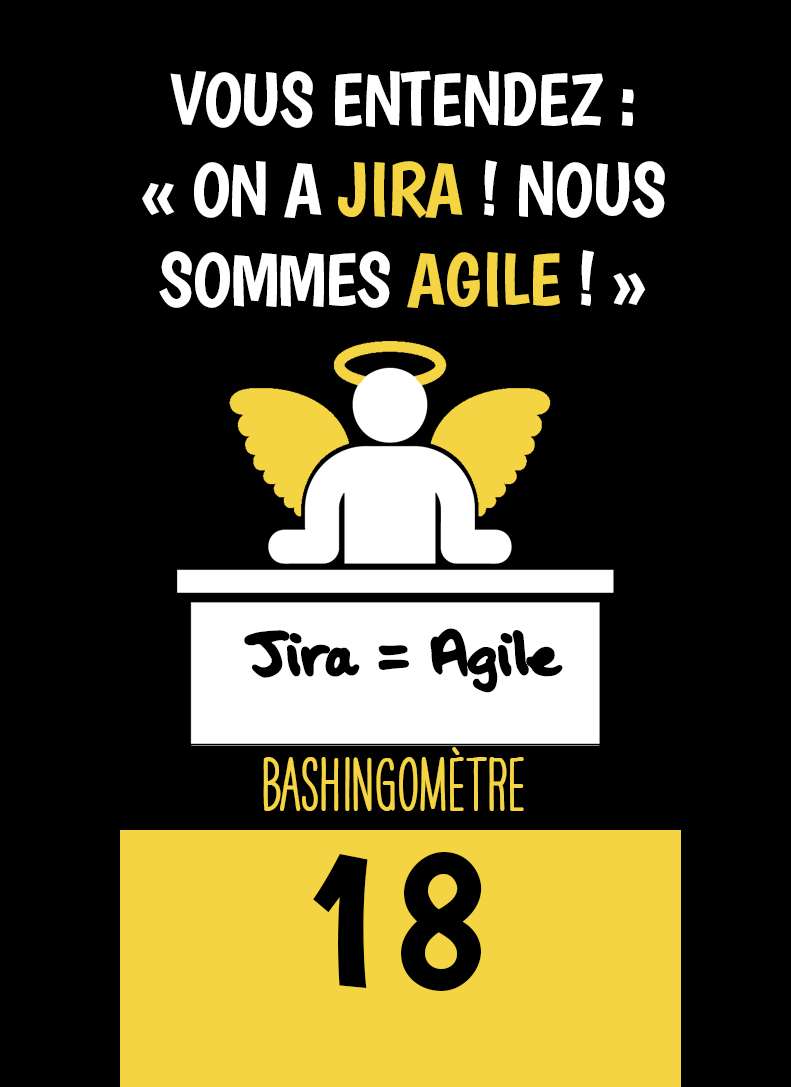
<style>
.page{position:relative;width:791px;height:1087px;background:#000000}
.page>*{position:absolute;margin:0}
.t1{font:75px "Boogaloo-Regular";letter-spacing:-0.02em;color:#ffffff}
.t2{font:75px "Boogaloo-Regular";letter-spacing:-0.02em;color:#f4d443}
.t3{font:75px "OakStreetW01-Regular";letter-spacing:-0.02em;color:#000000}
.t4{font:66.7px "HAVEANICEDAYTallW04-Bold";color:#f4d443}
.t5{font:200px "Boogaloo-Regular";color:#000000}
</style>
<div class="page">
<p class="t1" style="left:142px;top:71px;width:523px;height:237px;text-align:center">VOUS ENTENDEZ :<br>« ON A <span class="t2">JIRA </span>! NOUS SOMMES <span class="t2">AGILE </span>! »</p>
<p class="t3" style="left:244px;top:628px;width:319px;height:65px">Jira = Agile</p>
<p class="t4" style="left:263px;top:747px;width:261px;height:64px">BASHINgomètre</p>
<p class="t5" style="left:313px;top:852px;width:169px;height:139px">18</p>
</div>
